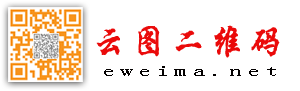
<style>
.page{position:relative;width:300px;height:91px;background:#ffffff}
.page>*{position:absolute;margin:0}
.t1{font:36px "SingkaibeiEG-Bold-GB";letter-spacing:0.2em;color:#ea0a0a;font-weight:bold;scale:0.89 1}
.t2{font:15px "SimSun";letter-spacing:0.2em;color:#030000;scale:1.69 1}
</style>
<div class="page">
<p class="t1" style="left:96px;top:25px;width:184px;height:33px">云图二维码</p>
<p class="t2" style="left:104px;top:66px;width:172px;height:10px">eweima.net</p>
</div>
